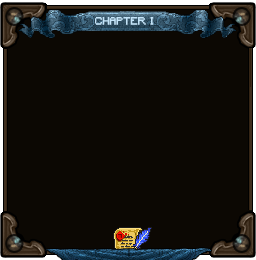
<style>
.page{position:relative;width:256px;height:260px;background:#0c0803}
.page>*{position:absolute;margin:0}
.t1{font:9.8px "Minecraft";letter-spacing:0.035em;color:#c3e4f9}
</style>
<div class="page">
<p class="t1" style="left:95px;top:17px;width:59px;height:8px">CHAPTER I</p>
</div>
